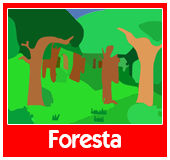
<style>
.page{position:relative;width:170px;height:160px;background:#ff0000}
.page>*{position:absolute;margin:0}
.t1{font:24px "ELEGANCE";color:#ffffff}
</style>
<div class="page">
<p class="t1" style="left:49px;top:130px;width:72px;height:18px">Foresta</p>
</div>
